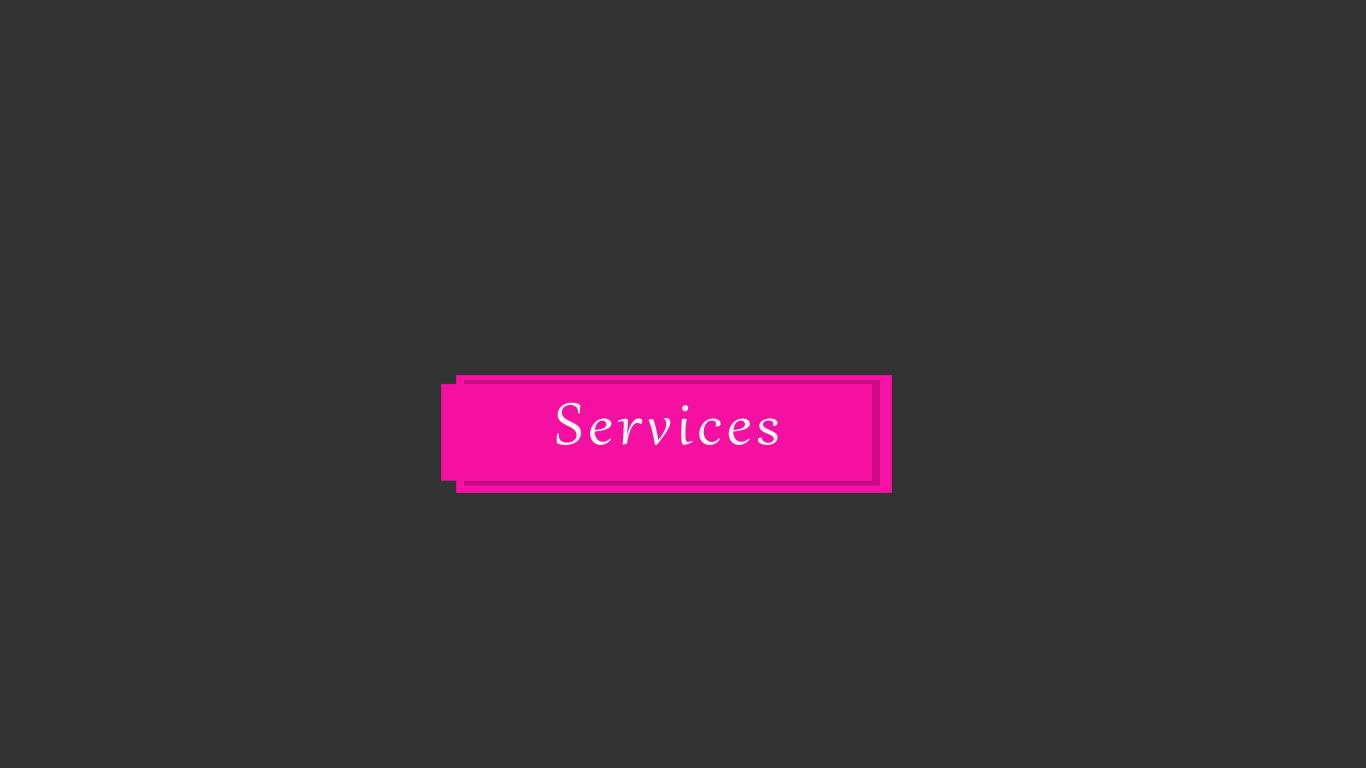
<style>
.page{position:relative;width:1366px;height:768px;background:#333333}
.page>*{position:absolute;margin:0}
.t1{font:72px "Gabriola";letter-spacing:0.07em;color:#faf7f9;scale:1.09 1}
</style>
<div class="page">
<p class="t1" style="left:556px;top:402px;width:222px;height:43px">Services</p>
</div>
